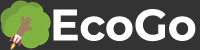
<style>
.page{position:relative;width:200px;height:50px;background:#333333}
.page>*{position:absolute;margin:0}
.t1{font:44px "Montserrat-Bold";color:#ffffff}
</style>
<div class="page">
<p class="t1" style="left:53px;top:9px;width:143px;height:33px">EcoGo</p>
</div>
